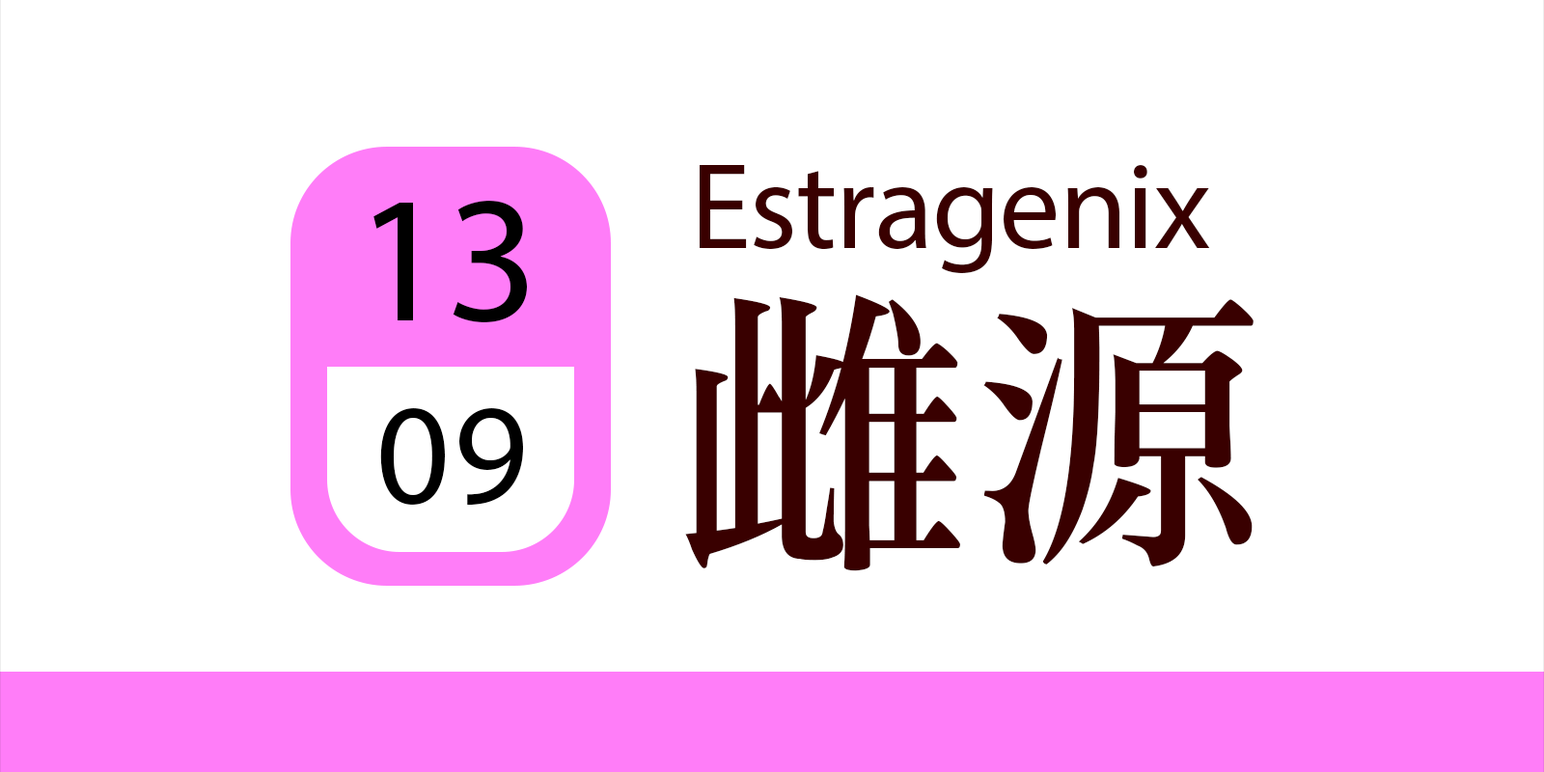
<style>
.page{position:relative;width:1544px;height:772px;background:#ffffff}
.page>*{position:absolute;margin:0}
.t1{font:122.7px "MyriadPro-Regular";letter-spacing:-0.01em;color:#390000}
.t2{font:181.3px "MyriadPro-Regular";letter-spacing:-0.01em;color:#000000}
.t3{font:298.5px "DFLiSong-W5-WIN-BF";letter-spacing:-0.01em;color:#390000}
.t4{font:145.2px "MyriadPro-Regular";letter-spacing:0.025em;color:#000000}
</style>
<div class="page">
<p class="t1" style="left:700px;top:165px;width:510px;height:108px">Estragenix</p>
<p class="t2" style="left:374px;top:201px;width:153px;height:121px">13</p>
<p class="t3" style="left:685px;top:294px;width:569px;height:277px">雌源</p>
<p class="t4" style="left:380px;top:408px;width:143px;height:98px">09</p>
</div>
